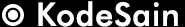
<style>
.page{position:relative;width:185px;height:27px;background:#000000}
.page>*{position:absolute;margin:0}
.t1{font:32px "FuturaBT-Medium";color:#ffffff;font-weight:bold}
</style>
<div class="page">
<p class="t1" style="left:38px;top:1px;width:140px;height:26px">KodeSain</p>
</div>
